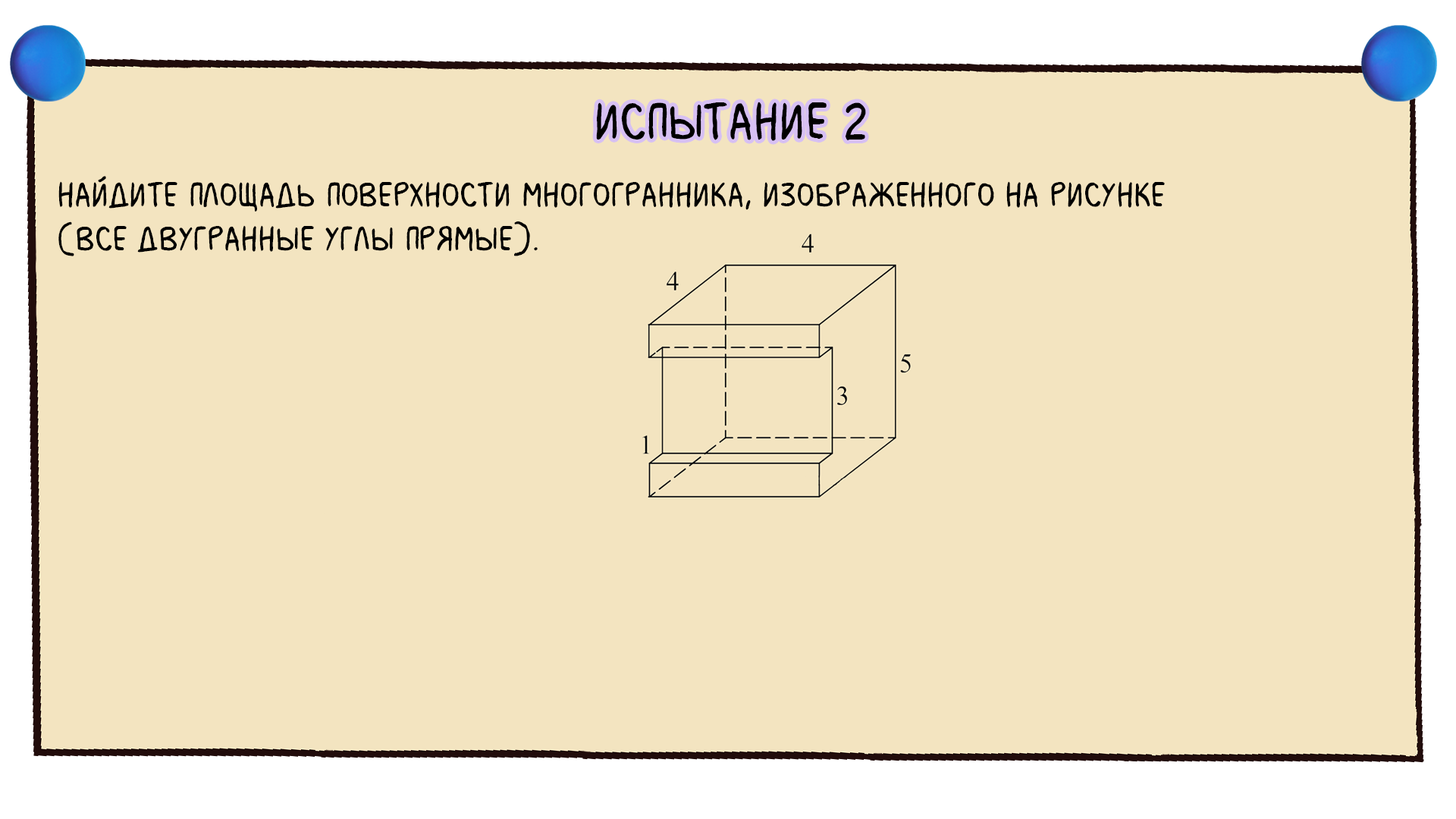
<style>
.page{position:relative;width:1456px;height:819px;background:#f3e4c0}
.page>*{position:absolute;margin:0}
.t1{font:54.6px "MilkMustacheBB";color:#000000}
.t2{font:36.4px "MilkMustacheBB";color:#000000}
</style>
<div class="page">
<p class="t1" style="left:596px;top:102px;width:270px;height:39px">испытание 2</p>
<p class="t2" style="left:58px;top:176px;width:1107px;height:80px">Найдите площадь поверхности многогранника, изображенного на рисунке <br>(все двугранные углы прямые).</p>
</div>
